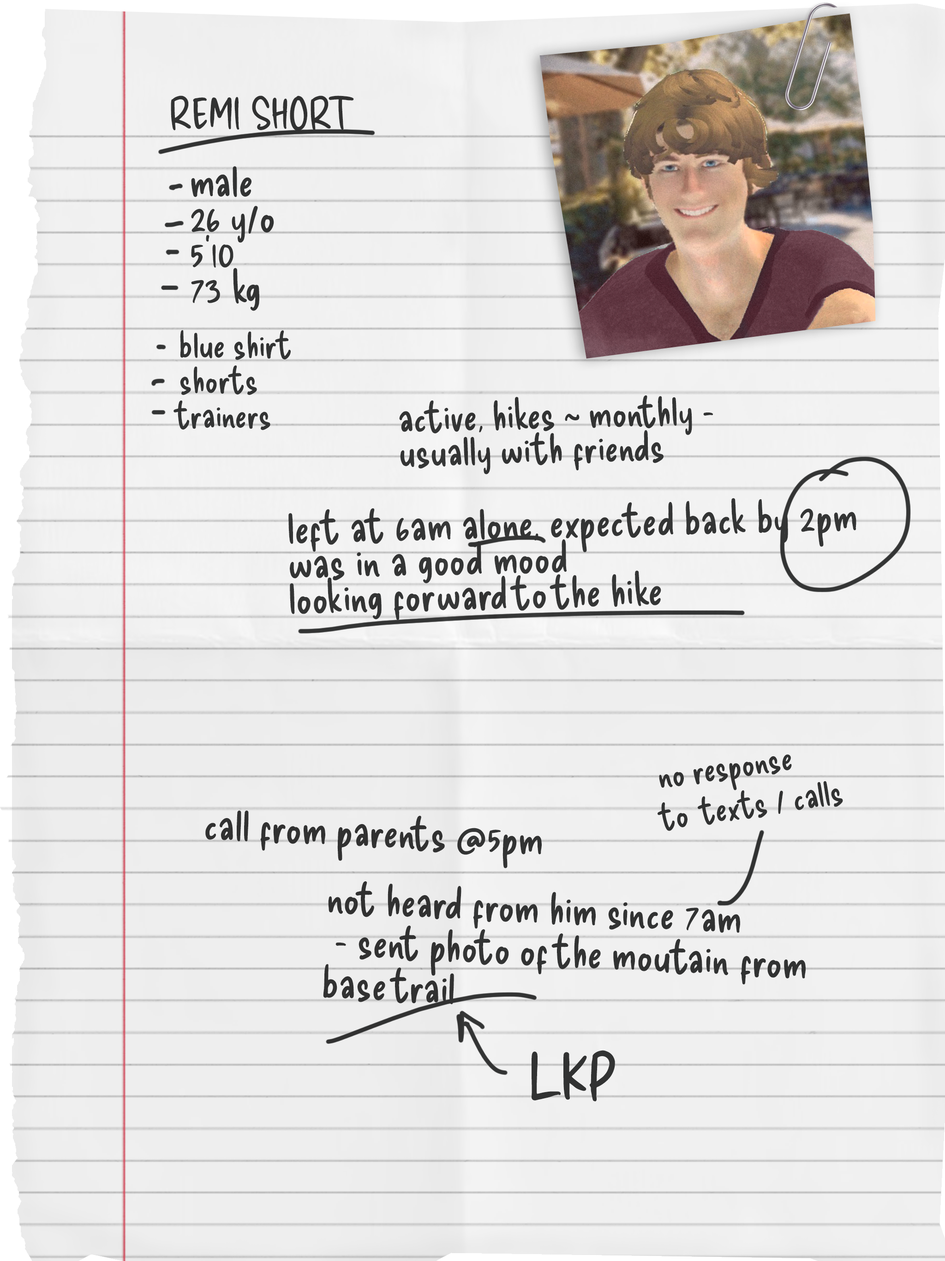
<style>
.page{position:relative;width:945px;height:1261px}
.page>*{position:absolute;margin:0}
.t1{font:42.9px "DeliciousHandrawn-Regular";color:#404141}
.t2{font:42.9px/35.5px "DeliciousHandrawn-Regular";color:#404141}
.t3{font:35.1px/35.1px "DeliciousHandrawn-Regular";color:#404141}
.t4{font:39.8px/34.5px "DeliciousHandrawn-Regular";color:#404141}
.t5{font:42.9px/35.1px "DeliciousHandrawn-Regular";color:#404141}
.t6{font:35.1px/41.1px "DeliciousHandrawn-Regular";color:#404141}
.t7{font:42.9px/42.5px "DeliciousHandrawn-Regular";color:#404141}
.t8{font:62.3px "DeliciousHandrawn-Regular";color:#404141}
</style>
<div class="page">
<p class="t1" style="left:171px;top:96px;width:183px;height:35px">REMI SHORT</p>
<p class="t2" style="left:191px;top:166px;width:83px;height:145px">male<br>26 y/o<br>5’10<br>73 kg</p>
<p class="t3" style="left:174px;top:330px;width:117px;height:100px">blue shirt<br>shorts<br>trainers</p>
<p class="t4" style="left:399px;top:395px;width:315px;height:79px;rotate:-1deg">active, hikes ~ monthly - <br>usually with friends</p>
<p class="t5" style="left:288px;top:498px;width:569px;height:122px;rotate:-1deg">left at 6am alone, expected back by 2pm<br>was in a good mood<br>looking forward to the hike</p>
<p class="t6" style="left:658px;top:755px;width:185px;height:76px;rotate:-8deg">no response <br>to  texts / calls</p>
<p class="t1" style="left:205px;top:811px;width:337px;height:58px;rotate:3deg">call from parents @5pm</p>
<p class="t7" style="left:323px;top:882px;width:483px;height:123px;rotate:3deg">not heard from him since 7am<br> - sent photo of the moutain from <br>base trail</p>
<p class="t8" style="left:532px;top:1051px;width:83px;height:51px">LKP</p>
</div>
